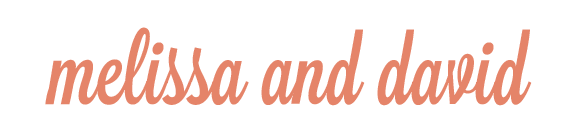
<style>
.page{position:relative;width:580px;height:140px;background:#ffffff}
.page>*{position:absolute;margin:0}
.t1{font:95px "Lavanderia-Sturdy";color:#e58469}
</style>
<div class="page">
<p class="t1" style="left:45px;top:27px;width:487px;height:79px">melissa and david</p>
</div>
